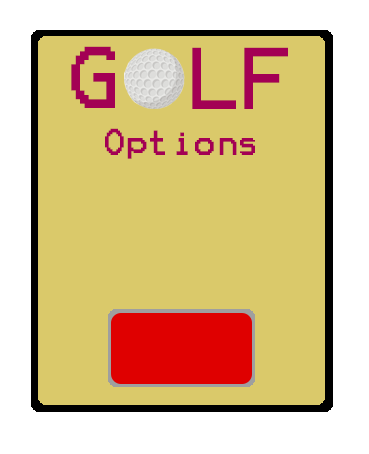
<style>
.page{position:relative;width:369px;height:454px;background:#dac96a}
.page>*{position:absolute;margin:0}
.t1{font:70px "Terminal";color:#a30054}
.t2{font:30px "Terminal";color:#a30054}
</style>
<div class="page">
<p class="t1" style="left:71px;top:46px;width:44px;height:62px">G</p>
<p class="t1" style="left:192px;top:47px;width:44px;height:62px">L</p>
<p class="t1" style="left:244px;top:47px;width:44px;height:62px">F</p>
<p class="t2" style="left:105px;top:128px;width:150px;height:31px">Options</p>
</div>
